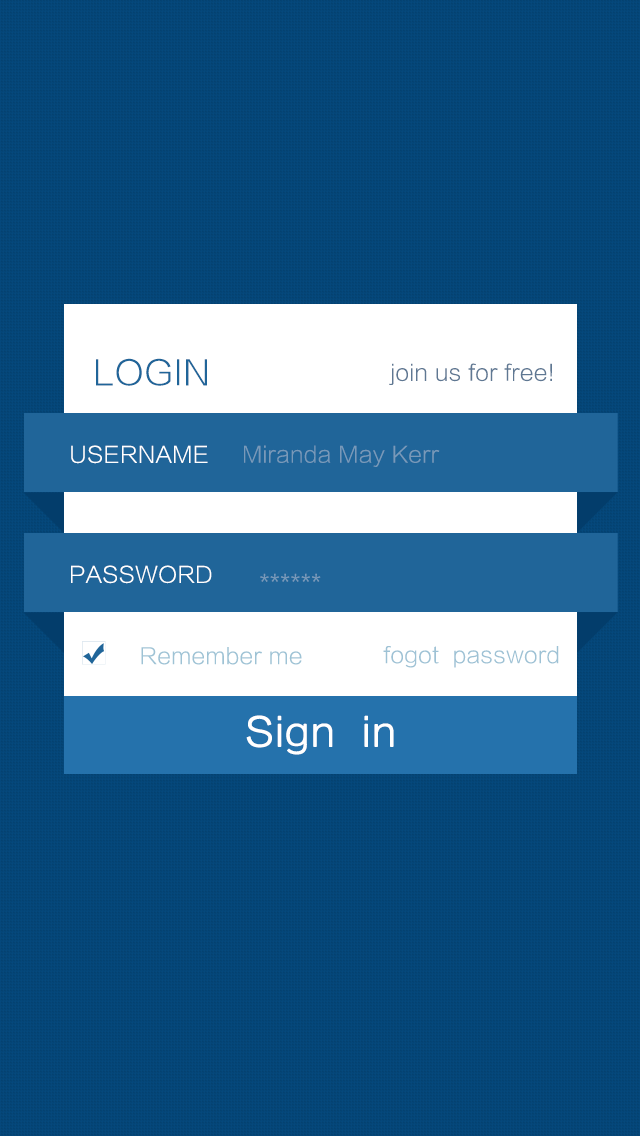
<style>
.page{position:relative;width:640px;height:1136px;background:#05477a}
.page>*{position:absolute;margin:0}
.t1{font:33.3px "STHeitiSC-Light";color:#206599}
.t2{font:21.7px "STHeitiSC-Light";color:#5f7893}
.t3{font:21.7px "STHeitiSC-Light";color:#ffffff}
.t4{font:21.7px "STHeitiSC-Light";color:#7899b9}
.t5{font:21.7px "STHeitiSC-Light";color:#9ec3d5}
.t6{font:21.7px "STHeitiSC-Light";color:#9ec2d5}
.t7{font:38.3px "STHeitiSC-Light";color:#ffffff;font-weight:bold}
</style>
<div class="page">
<p class="t1" style="left:96px;top:358px;width:111px;height:28px">LOGIN</p>
<p class="t2" style="left:389px;top:363px;width:163px;height:22px">join us for free!</p>
<p class="t3" style="left:71px;top:445px;width:137px;height:19px">USERNAME</p>
<p class="t4" style="left:244px;top:445px;width:196px;height:22px">Miranda May Kerr</p>
<p class="t3" style="left:71px;top:565px;width:141px;height:19px">PASSWORD</p>
<p class="t4" style="left:260px;top:573px;width:61px;height:9px">******</p>
<p class="t5" style="left:141px;top:647px;width:161px;height:18px">Remember me</p>
<p class="t6" style="left:383px;top:646px;width:176px;height:22px">fogot  password</p>
<p class="t7" style="left:246px;top:715px;width:148px;height:40px">Sign  in</p>
</div>
